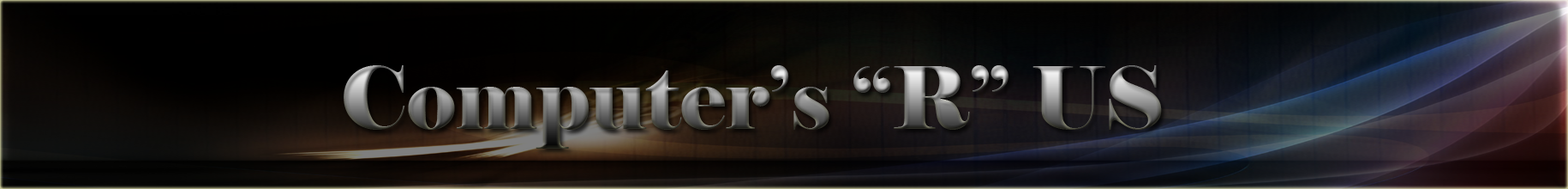
<style>
.page{position:relative;width:1568px;height:189px}
.page>*{position:absolute;margin:0}
.t1{font:85.7px "Elephant-Regular"}
</style>
<div class="page">
<p class="t1" style="left:344px;top:65px;width:818px;height:83px">Computer’s “R” US</p>
</div>
